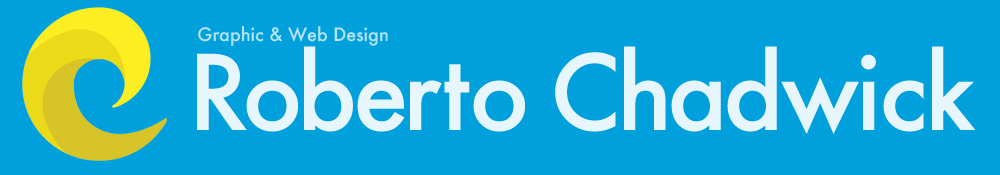
<style>
.page{position:relative;width:1000px;height:175px;background:#00a0dc}
.page>*{position:absolute;margin:0}
.t1{font:18px "Futura-Medium";color:#b3e3f5}
.t2{font:100.9px "Futura-Medium";letter-spacing:-0.025em;color:#e6f6fc}
.t3{font:100.9px "Futura-Medium";letter-spacing:-0.075em;color:#e6f6fc}
.t4{font:100.9px "Futura-Medium";letter-spacing:-0.05em;color:#e6f6fc}
.t5{font:100.9px "Futura-Medium";letter-spacing:0.01em;color:#e6f6fc}
.t6{font:100.9px "Futura-Medium";letter-spacing:-0.01em;color:#e6f6fc}
.t7{font:100.9px "Futura-Medium";color:#e6f6fc}
.t8{font:100.9px "Futura-Medium";letter-spacing:-0.04em;color:#e6f6fc}
</style>
<div class="page">
<p class="t1" style="left:198px;top:26px;width:190px;height:20px">Graphic &amp; Web Design</p>
<p class="t2" style="left:197px;top:46px;width:779px;height:88px"><span class="t3">R</span><span class="t4">obe</span><span class="t5">r</span><span class="t6">t</span><span class="t7">o </span><span class="t8">C</span><span class="t4">ha</span>dwick</p>
</div>
